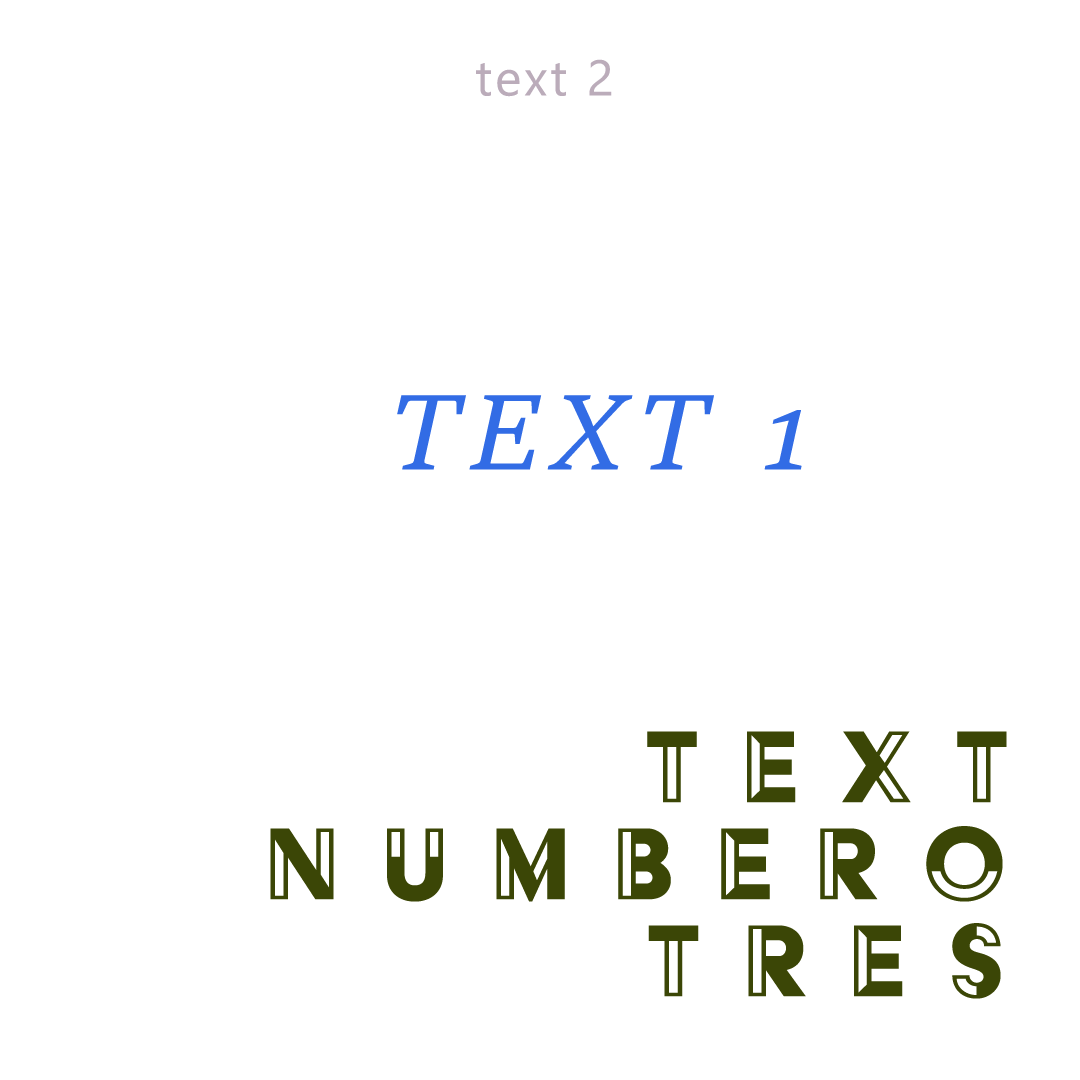
<style>
.page{position:relative;width:1080px;height:1080px;background:#ffffff}
.page>*{position:absolute;margin:0}
.t1{font:50px "SegoeUI";letter-spacing:0.06em;color:#bbacba}
.t2{font:117.7px "SitkaSubheading-Italic";letter-spacing:0.1em;color:#326ce5}
.t3{font:117.7px/97px "AcierBATText-Noir";letter-spacing:0.36em;color:#3b4606}
</style>
<div class="page">
<p class="t1" style="left:476px;top:59px;width:136px;height:38px">text 2</p>
<p class="t2" style="left:397px;top:395px;width:405px;height:75px">TEXT 1</p>
<p class="t3" style="left:270px;top:731px;width:737px;height:268px;text-align:right">text numbero tres</p>
</div>
